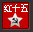
<style>
.page{position:relative;width:33px;height:32px;background:#c50000}
.page>*{position:absolute;margin:0}
.t1{font:10.4px "SimSun";letter-spacing:-0.25em;color:#ffffff}
</style>
<div class="page">
<p class="t1" style="left:4px;top:4px;width:24px;height:8px">红十五</p>
</div>
